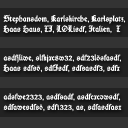
<style>
.page{position:relative;width:128px;height:128px;background:#333333}
.page>*{position:absolute;margin:0}
.t1{font:8.6px "Cimbrian";color:#ffffff}
</style>
<div class="page">
<p class="t1" style="left:3px;top:14px;width:123px;height:20px">Stephansdom, Karlskirche, Karlsplatz,<br>Haas Haus, XI, LOLisdf, Italien,  X</p>
<p class="t1" style="left:3px;top:54px;width:118px;height:19px">asdfjliwe, slfkjxc8w32, sdf23lösfasdf,<br>Haas sdfsö, sdfIsdf, sdfsasdf3, sdfx</p>
<p class="t1" style="left:3px;top:93px;width:119px;height:19px">adsfwe2323, asdfsadf, asdfcxcvwsdf,<br>sdfawesdfsö, sdf1323, as, sdfasdfasx</p>
</div>
